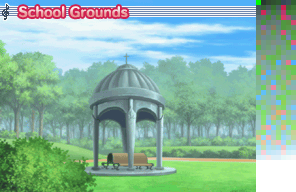
<style>
.page{position:relative;width:296px;height:192px}
.page>*{position:absolute;margin:0}
.t1{font:12px "HummingStd-E";letter-spacing:0.02em}
</style>
<div class="page">
<p class="t1" style="left:19px;top:6px;width:109px;height:12px">School Grounds</p>
</div>
